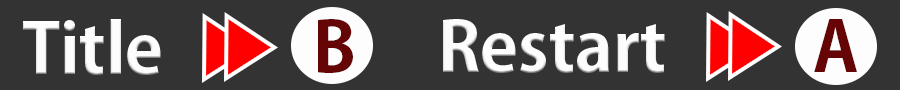
<style>
.page{position:relative;width:900px;height:90px;background:#333333}
.page>*{position:absolute;margin:0}
.t1{font:69px "KozGoPr6N-Bold";color:#fdfdfd}
.t2{font:69px "KozGoPr6N-Bold";color:#650505}
</style>
<div class="page">
<p class="t1" style="left:23px;top:19px;width:138px;height:56px">Title</p>
<p class="t2" style="left:318px;top:19px;width:35px;height:54px">B</p>
<p class="t1" style="left:443px;top:19px;width:222px;height:54px">Restart</p>
<p class="t2" style="left:814px;top:19px;width:43px;height:53px">A</p>
</div>
